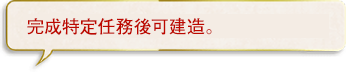
<style>
.page{position:relative;width:346px;height:72px;background:#f4ece4}
.page>*{position:absolute;margin:0}
.t1{font:18px "FutoGoB101Pr5-Bold";color:#bd0800}
</style>
<div class="page">
<p class="t1" style="left:27px;top:17px;width:185px;height:18px">完成特定任務後可建造。</p>
</div>
